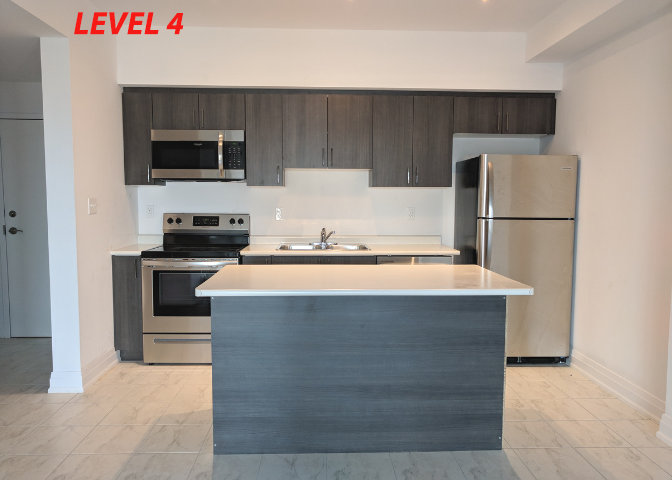
<style>
.page{position:relative;width:672px;height:480px}
.page>*{position:absolute;margin:0}
.t1{font:32.4px "MyriadPro-BoldIt";letter-spacing:0.01em;color:#f51a15}
</style>
<div class="page">
<p class="t1" style="left:74px;top:12px;width:110px;height:23px">LEVEL 4</p>
</div>
